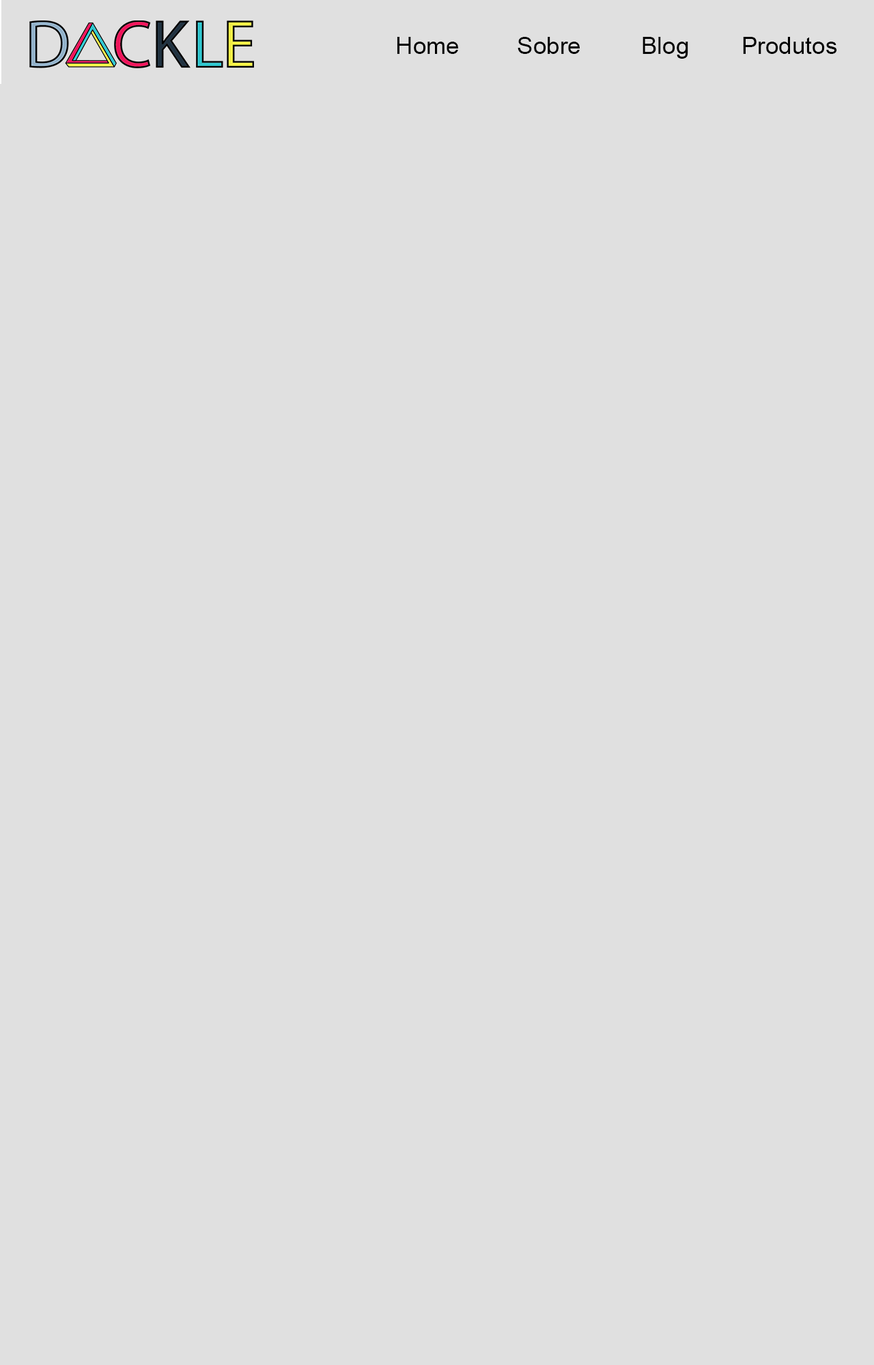
<style>
.page{position:relative;width:874px;height:1365px;background:#e0e0e0}
.page>*{position:absolute;margin:0}
.t1{font:23.9px "ArialMT";color:#000000}
</style>
<div class="page">
<p class="t1" style="left:397px;top:37px;width:61px;height:17px">Home</p>
<p class="t1" style="left:517px;top:37px;width:62px;height:17px">Sobre</p>
<p class="t1" style="left:642px;top:37px;width:46px;height:22px">Blog</p>
<p class="t1" style="left:743px;top:37px;width:94px;height:17px">Produtos</p>
</div>
